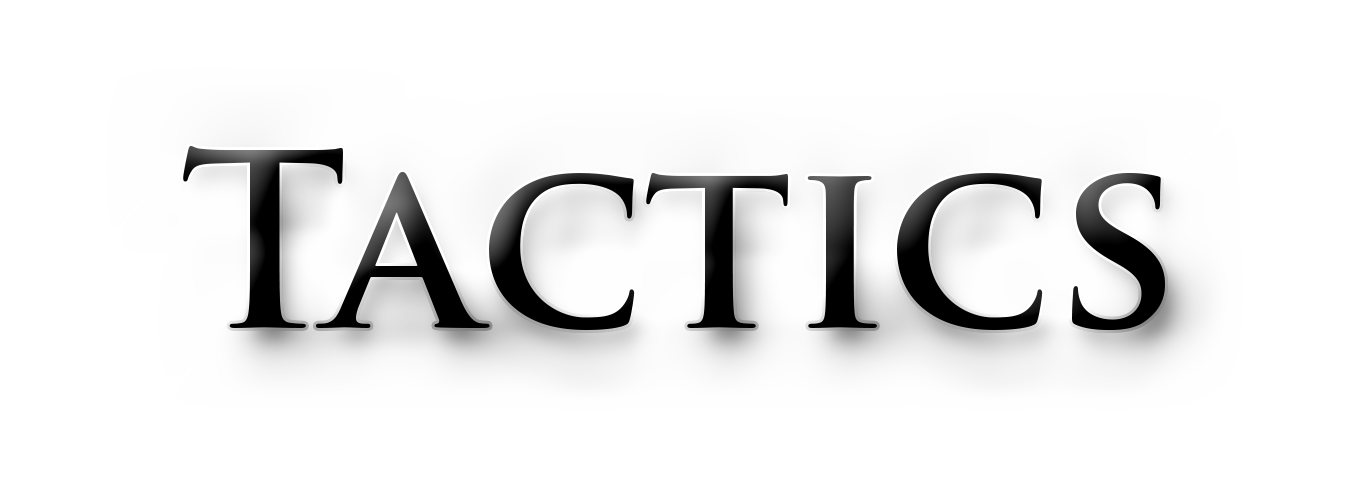
<style>
.page{position:relative;width:1360px;height:480px;background:#ffffff}
.page>*{position:absolute;margin:0}
.t1{font:236.4px "TrajanPro-Bold";color:#000000}
</style>
<div class="page">
<p class="t1" style="left:183px;top:146px;width:982px;height:185px">Tactics</p>
</div>
